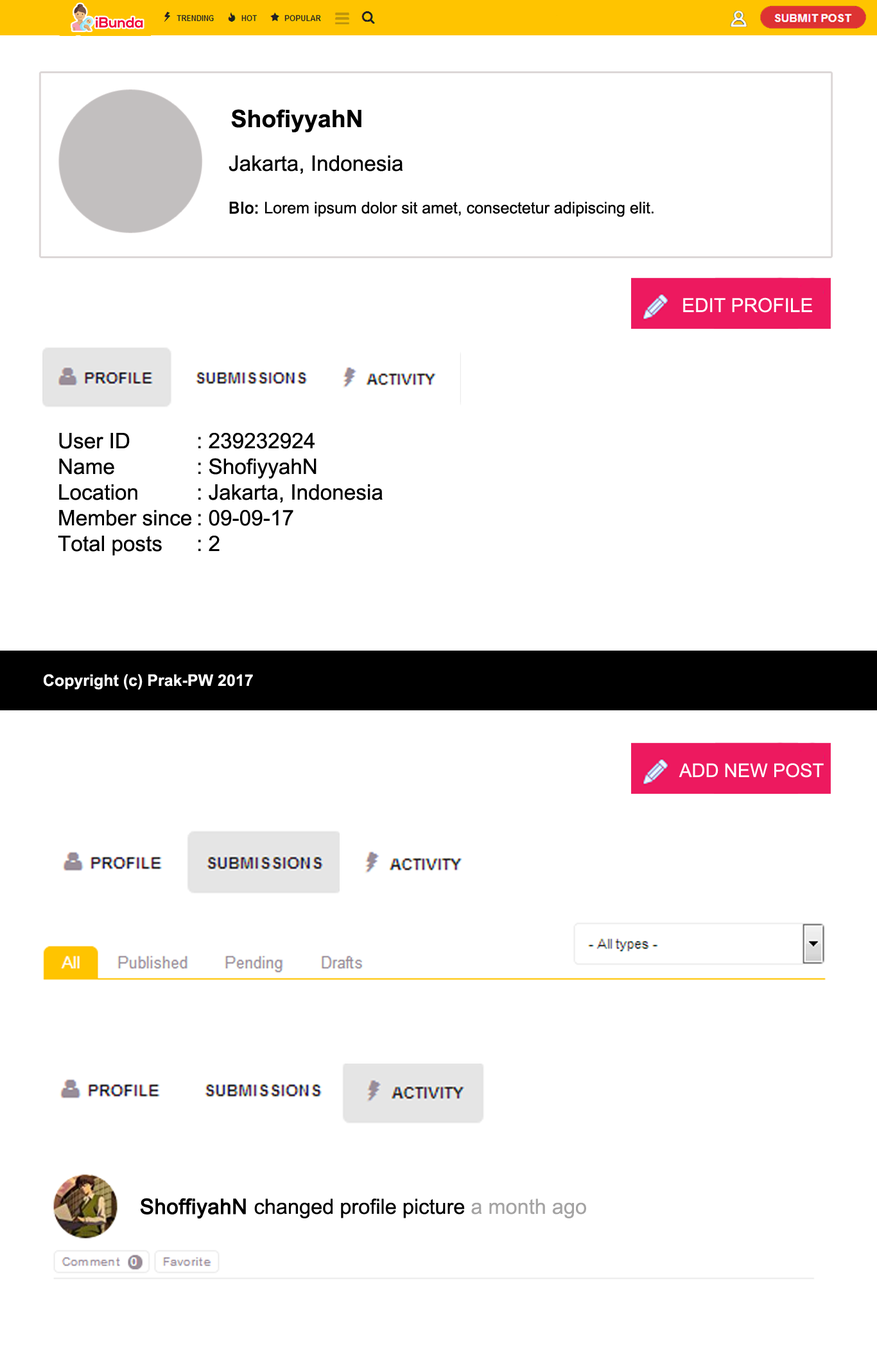
<style>
.page{position:relative;width:877px;height:1359px;background:#ffffff}
.page>*{position:absolute;margin:0}
.t1{font:24.1px "Arial-BoldMT";color:#000000}
.t2{font:21.4px "ArialMT";color:#000000}
.t3{font:16.1px "ArialMT";color:#000000}
.t4{font:16.1px "ArialMT";color:#000000;font-weight:bold}
.t5{font:19.2px "ArialMT";color:#ffffff}
.t6{font:16.1px "Arial-BoldMT";color:#ffffff}
.t7{font:18.7px "ArialMT";color:#ffffff}
.t8{font:20.9px "ArialMT";color:#000000}
.t9{font:20.9px "ArialMT";color:#000000;font-weight:bold}
.t10{font:20.9px "ArialMT";color:#a4a3a3}
</style>
<div class="page">
<p class="t1" style="left:231px;top:109px;width:131px;height:23px">ShofiyyahN</p>
<p class="t2" style="left:229px;top:155px;width:174px;height:19px">Jakarta, Indonesia</p>
<p class="t3" style="left:229px;top:202px;width:425px;height:15px"><span class="t4">BIo: </span>Lorem ipsum dolor sit amet, consectetur adipiscing elit.</p>
<p class="t5" style="left:683px;top:297px;width:130px;height:16px">EDIT PROFILE</p>
<p class="t2" style="left:58px;top:433px;width:325px;height:123px;text-align:justify">User ID   : 239232924<br>Name    : ShofiyyahN<br>Location   : Jakarta, Indonesia<br>Member since : 09-09-17<br>Total posts  : 2</p>
<p class="t6" style="left:43px;top:674px;width:210px;height:16px">Copyright (c) Prak-PW 2017</p>
<p class="t7" style="left:679px;top:763px;width:145px;height:15px">ADD NEW POST</p>
<p class="t8" style="left:141px;top:1198px;width:445px;height:21px"><span class="t9">ShoffiyahN </span>changed profile picture <span class="t10">a month ago</span></p>
</div>
